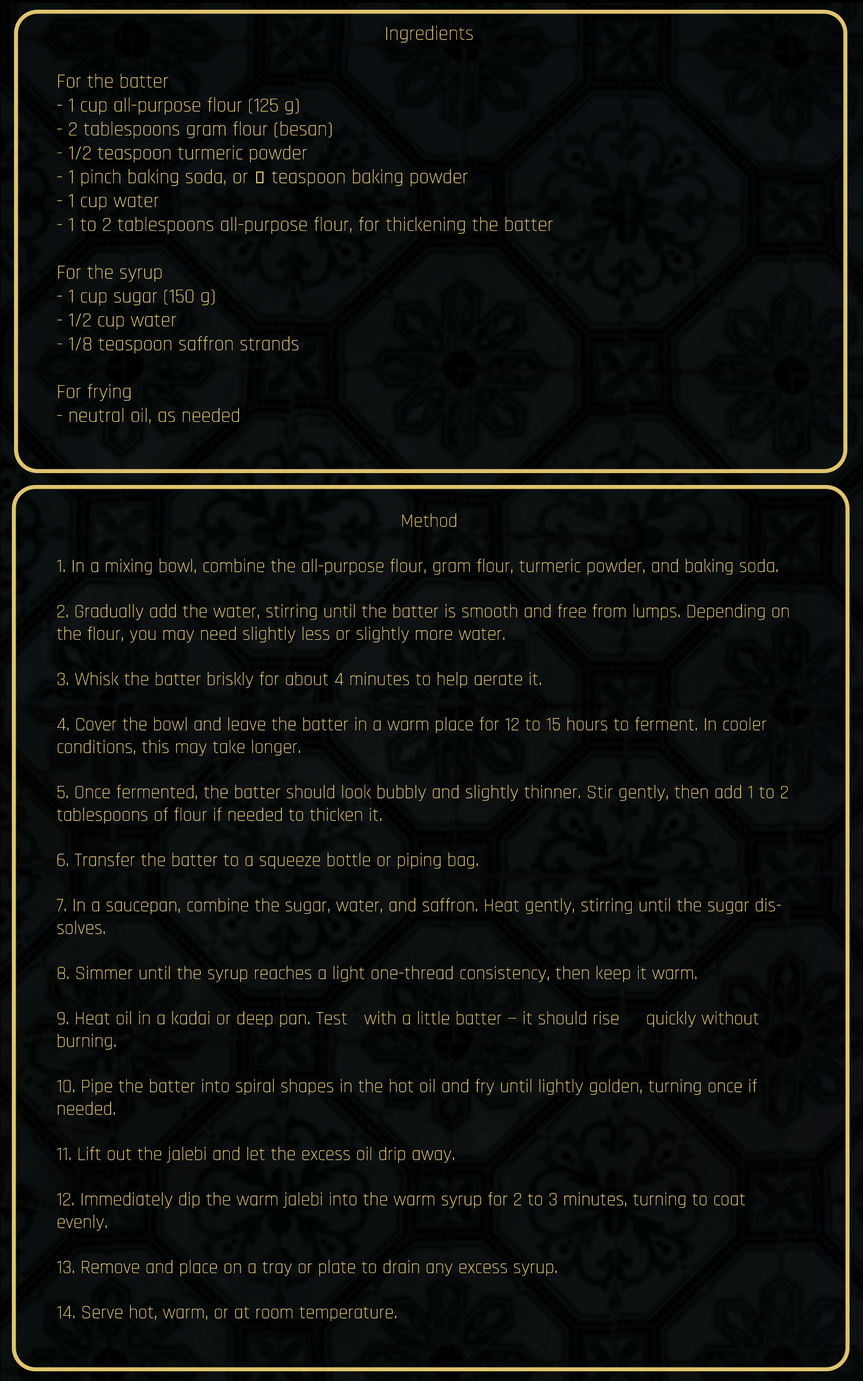
<style>
.page{position:relative;width:863px;height:1381px}
.page>*{position:absolute;margin:0}
.t1{font:19.9px "Rajdhani-Light";color:#ffde7e}
.t2{font:18.9px "Rajdhani-Light";color:#ffdf7f}
</style>
<div class="page">
<p class="t1" style="left:57px;top:25px;width:496px;height:399px;text-align:center">Ingredients<br><br>For the batter<br>- 1 cup all-purpose flour (125 g)<br>- 2 tablespoons gram flour (besan)<br>- 1/2 teaspoon turmeric powder<br>- 1 pinch baking soda, or ¼ teaspoon baking powder<br>- 1 cup water<br>- 1 to 2 tablespoons all-purpose flour, for thickening the batter<br><br>For the syrup<br>- 1 cup sugar (150 g)<br>- 1/2 cup water<br>- 1/8 teaspoon saffron strands<br><br>For frying<br>- neutral oil, as needed</p>
<p class="t2" style="left:57px;top:514px;width:732px;height:807px;text-align:center">Method<br><br>1. In a mixing bowl, combine the all-purpose flour, gram flour, turmeric powder, and baking soda.<br><br>2. Gradually add the water, stirring until the batter is smooth and free from lumps. Depending on the flour, you may need slightly less or slightly more water.<br><br>3. Whisk the batter briskly for about 4 minutes to help aerate it.<br><br>4. Cover the bowl and leave the batter in a warm place for 12 to 15 hours to ferment. In cooler conditions, this may take longer.<br><br>5. Once fermented, the batter should look bubbly and slightly thinner. Stir gently, then add 1 to 2 tablespoons of flour if needed to thicken it.<br><br>6. Transfer the batter to a squeeze bottle or piping bag.<br><br>7. In a saucepan, combine the sugar, water, and saffron. Heat gently, stirring until the sugar dissolves.<br><br>8. Simmer until the syrup reaches a light one-thread consistency, then keep it warm.<br><br>9. Heat oil in a kadai or deep pan. Test  with a little batter — it should rise     quickly without burning.<br> <br>10. Pipe the batter into spiral shapes in the hot oil and fry until lightly golden, turning once if needed.<br><br>11. Lift out the jalebi and let the excess oil drip away.<br><br>12. Immediately dip the warm jalebi into the warm syrup for 2 to 3 minutes, turning to coat evenly.<br><br>13. Remove and place on a tray or plate to drain any excess syrup.<br><br>14. Serve hot, warm, or at room temperature.</p>
</div>
